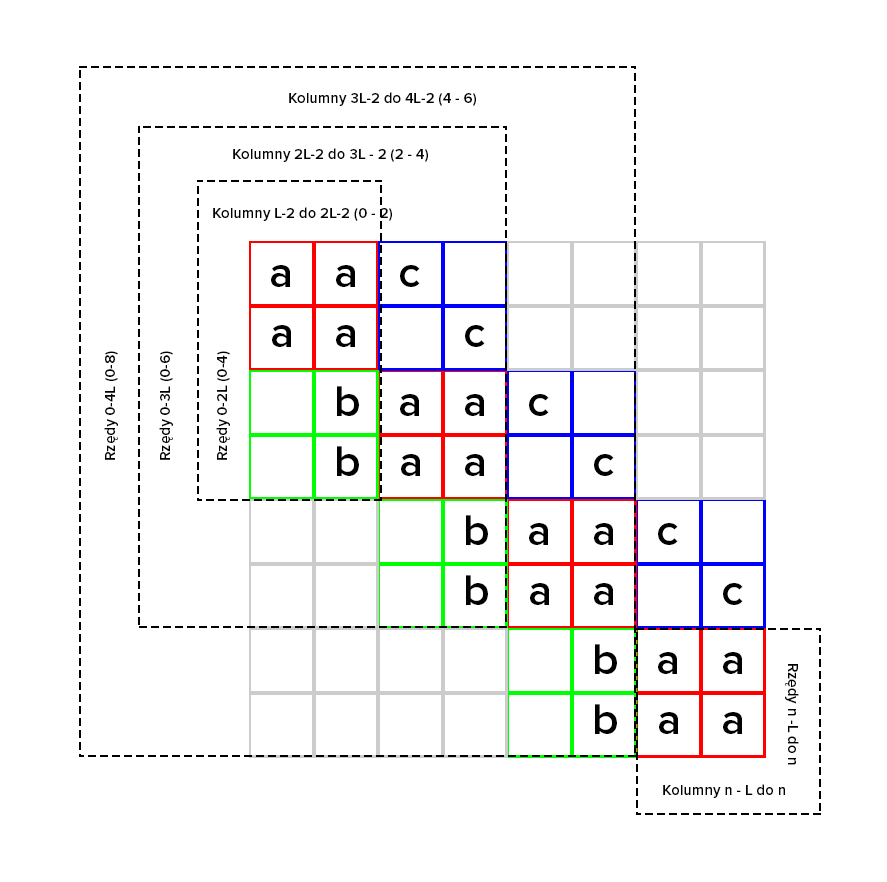
<style>
.page{position:relative;width:887px;height:882px;background:#ffffff}
.page>*{position:absolute;margin:0}
.t1{font:15px "ProximaNova-Semibold";color:#000000}
.t2{font:45.1px "ProximaNova-Semibold";color:#000000}
</style>
<div class="page">
<p class="t1" style="left:289px;top:92px;width:187px;height:14px">Kolumny 3L-2 do 4L-2 (4 - 6)</p>
<p class="t1" style="left:233px;top:148px;width:195px;height:14px">Kolumny 2L-2 do 3L - 2 (2 - 4)</p>
<p class="t1" style="left:213px;top:207px;width:179px;height:14px">Kolumny L-2 do 2L-2 (0 - 2)</p>
<p class="t2" style="left:271px;top:265px;width:19px;height:22px">a</p>
<p class="t2" style="left:336px;top:265px;width:19px;height:22px">a</p>
<p class="t2" style="left:400px;top:265px;width:20px;height:22px">c</p>
<p class="t2" style="left:272px;top:325px;width:19px;height:22px">a</p>
<p class="t2" style="left:336px;top:325px;width:19px;height:22px">a</p>
<p class="t2" style="left:465px;top:325px;width:20px;height:22px">c</p>
<p class="t1" style="left:104px;top:351px;width:14px;height:109px;rotate:-90deg">Rzędy 0-4L (0-8)</p>
<p class="t1" style="left:159px;top:351px;width:14px;height:109px;rotate:-90deg">Rzędy 0-3L (0-6)</p>
<p class="t1" style="left:216px;top:351px;width:14px;height:109px;rotate:-90deg">Rzędy 0-2L (0-4)</p>
<p class="t2" style="left:337px;top:386px;width:22px;height:30px">b</p>
<p class="t2" style="left:400px;top:394px;width:19px;height:22px">a</p>
<p class="t2" style="left:465px;top:394px;width:19px;height:22px">a</p>
<p class="t2" style="left:529px;top:394px;width:20px;height:22px">c</p>
<p class="t2" style="left:337px;top:446px;width:22px;height:30px">b</p>
<p class="t2" style="left:401px;top:454px;width:19px;height:22px">a</p>
<p class="t2" style="left:465px;top:454px;width:19px;height:22px">a</p>
<p class="t2" style="left:594px;top:454px;width:20px;height:22px">c</p>
<p class="t2" style="left:466px;top:515px;width:22px;height:30px">b</p>
<p class="t2" style="left:529px;top:523px;width:19px;height:22px">a</p>
<p class="t2" style="left:594px;top:523px;width:19px;height:22px">a</p>
<p class="t2" style="left:658px;top:523px;width:20px;height:22px">c</p>
<p class="t2" style="left:466px;top:575px;width:22px;height:30px">b</p>
<p class="t2" style="left:530px;top:583px;width:19px;height:22px">a</p>
<p class="t2" style="left:594px;top:583px;width:19px;height:22px">a</p>
<p class="t2" style="left:723px;top:583px;width:20px;height:22px">c</p>
<p class="t2" style="left:595px;top:644px;width:22px;height:30px">b</p>
<p class="t2" style="left:658px;top:652px;width:19px;height:22px">a</p>
<p class="t2" style="left:723px;top:652px;width:19px;height:22px">a</p>
<p class="t1" style="left:785px;top:664px;width:14px;height:101px;rotate:90deg">Rzędy n -L do n</p>
<p class="t2" style="left:595px;top:704px;width:22px;height:30px">b</p>
<p class="t2" style="left:659px;top:712px;width:19px;height:22px">a</p>
<p class="t2" style="left:723px;top:712px;width:19px;height:22px">a</p>
<p class="t1" style="left:663px;top:784px;width:122px;height:14px">Kolumny n - L do n</p>
</div>
